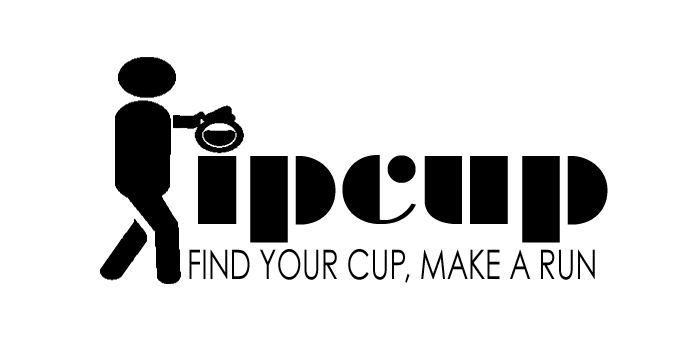
<style>
.page{position:relative;width:696px;height:352px;background:#ffffff}
.page>*{position:absolute;margin:0}
.t1{font:40.8px "CenturyGothic";color:#000000;scale:0.72 1}
</style>
<div class="page">
<p class="t1" style="left:189px;top:249px;width:406px;height:34px">FIND YOUR CUP, MAKE A RUN</p>
</div>
